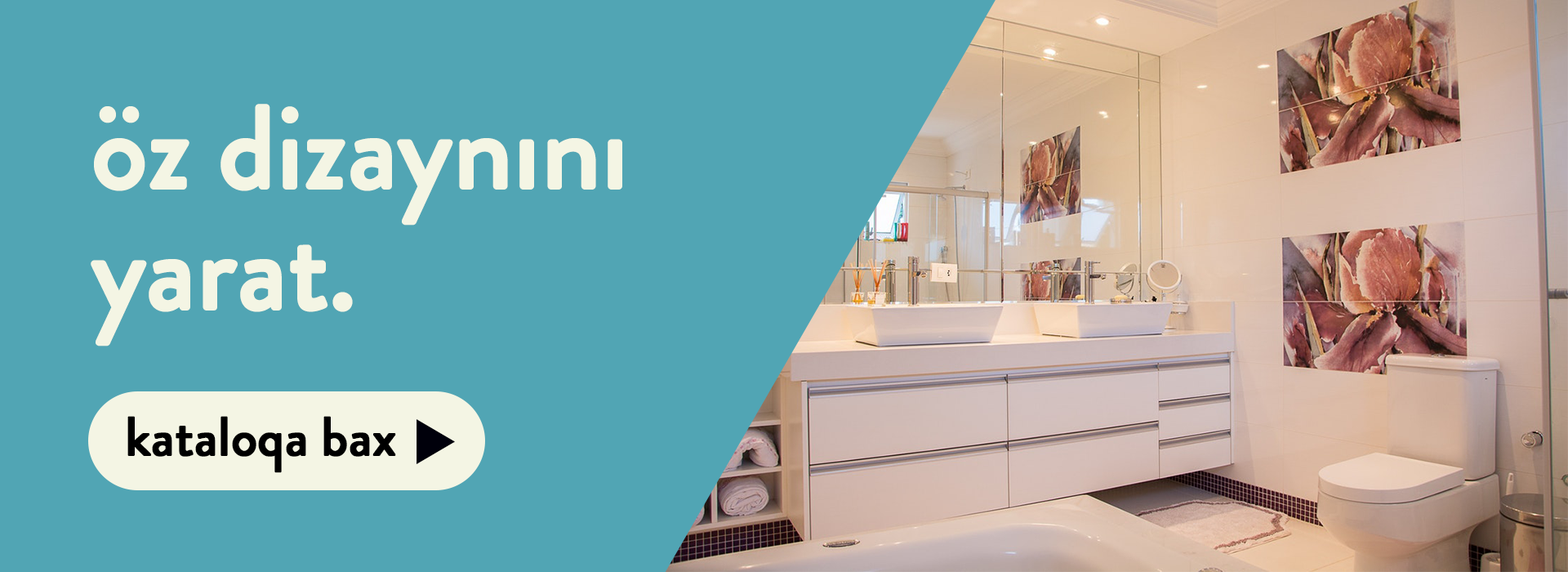
<style>
.page{position:relative;width:1568px;height:572px;background:#51a5b4}
.page>*{position:absolute;margin:0}
.t1{font:117.6px/120.9px "BrandonGrotesque-Medium";letter-spacing:-0.02em;color:#f4f5e4;font-weight:bold}
.t2{font:55.3px "BrandonGrotesque-Medium";letter-spacing:-0.02em;color:#000000;font-weight:bold}
</style>
<div class="page">
<p class="t1" style="left:91px;top:104px;width:531px;height:242px">öz dizaynını<br>yarat.</p>
<p class="t2" style="left:127px;top:416px;width:269px;height:57px">kataloqa bax</p>
</div>
